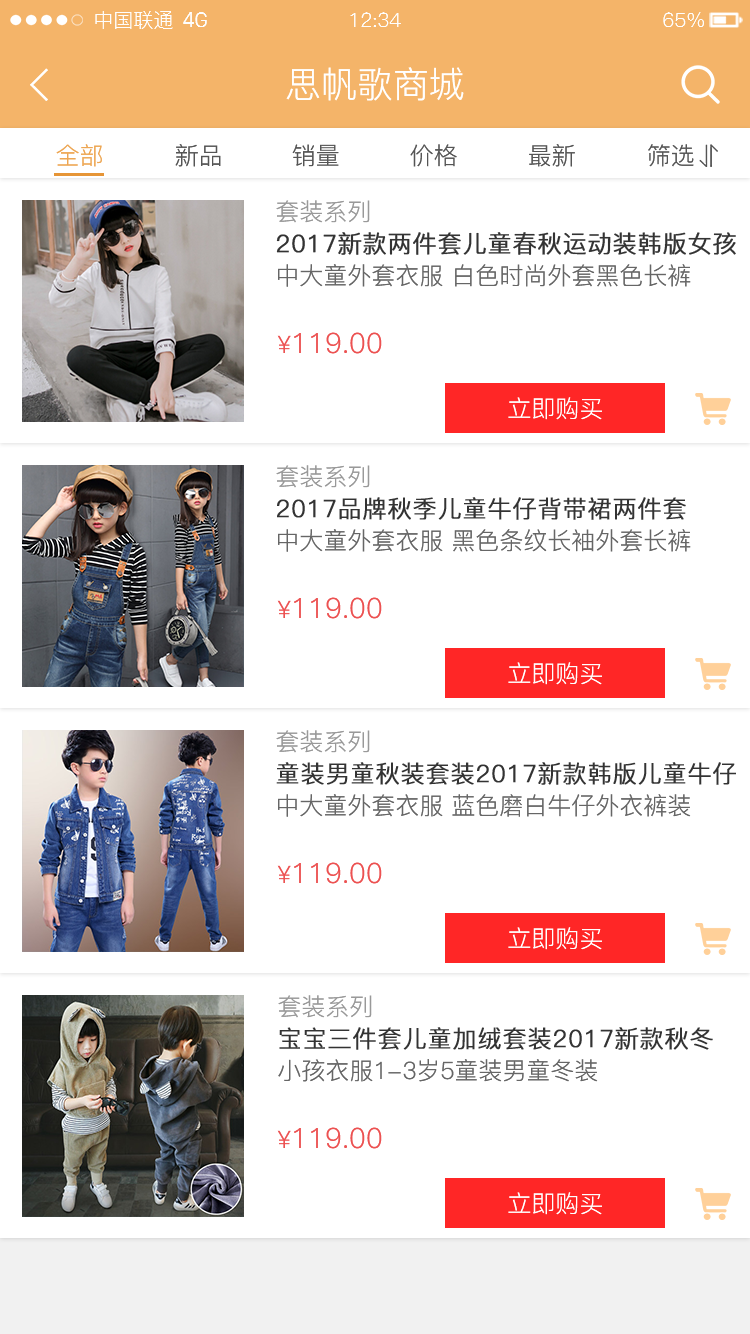
<style>
.page{position:relative;width:750px;height:1334px;background:#ffffff}
.page>*{position:absolute;margin:0}
.t1{font:20px "PingFang-SC-Regular";color:#fefefe}
.t2{font:20px "SanFranciscoDisplay";color:#fefefe}
.t3{font:36px "PingFang-SC-Regular";color:#ffffff}
.t4{font:24px "PingFang-SC-Regular";color:#eda653}
.t5{font:24px "PingFang-SC-Regular";color:#555555}
.t6{font:24px "PingFang-SC-Regular";color:#999999}
.t7{font:24px "PingFang-SC-Regular";color:#333333;font-weight:bold}
.t8{font:24px "PingFang-SC-Regular";color:#666666}
.t9{font:28px "PingFang-SC-Regular";color:#ec5252}
.t10{font:24px "PingFang-SC-Regular";color:#ec5252}
.t11{font:24px "PingFang-SC-Regular";color:#ffffff}
</style>
<div class="page">
<p class="t1" style="left:95px;top:11px;width:78px;height:18px">中国联通</p>
<p class="t2" style="left:183px;top:12px;width:24px;height:15px">4G</p>
<p class="t1" style="left:350px;top:12px;width:51px;height:15px">12:34</p>
<p class="t1" style="left:663px;top:12px;width:41px;height:15px">65%</p>
<p class="t3" style="left:286px;top:67px;width:178px;height:34px">思帆歌商城</p>
<p class="t4" style="left:56px;top:144px;width:46px;height:23px">全部</p>
<p class="t5" style="left:175px;top:144px;width:46px;height:23px">新品</p>
<p class="t5" style="left:292px;top:144px;width:47px;height:23px">销量</p>
<p class="t5" style="left:410px;top:144px;width:47px;height:23px">价格</p>
<p class="t5" style="left:529px;top:144px;width:46px;height:23px">最新</p>
<p class="t5" style="left:648px;top:144px;width:46px;height:23px">筛选</p>
<p class="t6" style="left:276px;top:200px;width:94px;height:23px">套装系列</p>
<p class="t7" style="left:276px;top:232px;width:460px;height:23px">2017新款两件套儿童春秋运动装韩版女孩</p>
<p class="t8" style="left:278px;top:264px;width:413px;height:23px">中大童外套衣服 白色时尚外套黑色长裤</p>
<p class="t9" style="left:277px;top:332px;width:105px;height:22px"><span class="t10">¥</span>119.00</p>
<p class="t11" style="left:508px;top:397px;width:94px;height:23px">立即购买</p>
<p class="t6" style="left:276px;top:465px;width:94px;height:23px">套装系列</p>
<p class="t7" style="left:277px;top:497px;width:409px;height:23px">2017品牌秋季儿童牛仔背带裙两件套</p>
<p class="t8" style="left:278px;top:529px;width:413px;height:23px">中大童外套衣服 黑色条纹长袖外套长裤</p>
<p class="t9" style="left:277px;top:597px;width:105px;height:22px"><span class="t10">¥</span>119.00</p>
<p class="t11" style="left:508px;top:662px;width:94px;height:23px">立即购买</p>
<p class="t6" style="left:276px;top:730px;width:94px;height:23px">套装系列</p>
<p class="t7" style="left:276px;top:762px;width:460px;height:23px">童装男童秋装套装2017新款韩版儿童牛仔</p>
<p class="t8" style="left:278px;top:794px;width:413px;height:23px">中大童外套衣服 蓝色磨白牛仔外衣裤装</p>
<p class="t9" style="left:277px;top:862px;width:105px;height:22px"><span class="t10">¥</span>119.00</p>
<p class="t11" style="left:508px;top:927px;width:94px;height:23px">立即购买</p>
<p class="t6" style="left:278px;top:995px;width:94px;height:23px">套装系列</p>
<p class="t7" style="left:279px;top:1027px;width:434px;height:23px">宝宝三件套儿童加绒套装2017新款秋冬</p>
<p class="t8" style="left:278px;top:1059px;width:320px;height:23px">小孩衣服1-3岁5童装男童冬装</p>
<p class="t9" style="left:277px;top:1127px;width:105px;height:22px"><span class="t10">¥</span>119.00</p>
<p class="t11" style="left:508px;top:1192px;width:94px;height:23px">立即购买</p>
</div>
